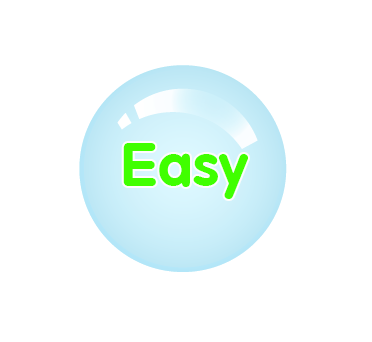
<style>
.page{position:relative;width:372px;height:342px;background:#ffffff}
.page>*{position:absolute;margin:0}
.t1{font:60px "VNI-Vari";color:#40ff00}
</style>
<div class="page">
<p class="t1" style="left:123px;top:143px;width:125px;height:56px">Easy</p>
</div>
